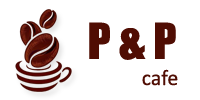
<style>
.page{position:relative;width:200px;height:100px;background:#ffffff}
.page>*{position:absolute;margin:0}
.t1{font:46px "Impact";color:#500d03}
.t2{font:22px "Calibri";color:#500d03}
</style>
<div class="page">
<p class="t1" style="left:89px;top:22px;width:87px;height:38px">P &amp; P</p>
<p class="t2" style="left:142px;top:69px;width:36px;height:17px">cafe</p>
</div>
